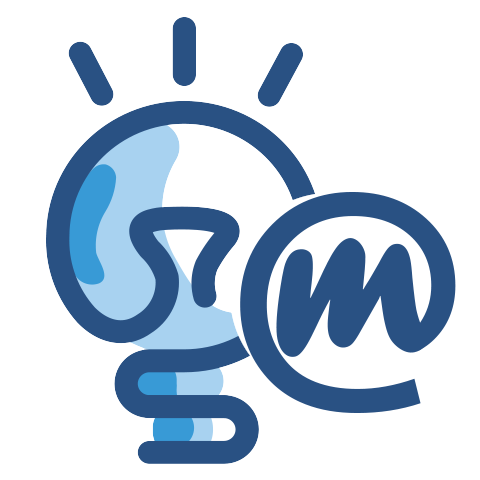
<style>
.page{position:relative;width:480px;height:480px;background:#ffffff}
.page>*{position:absolute;margin:0}
.t1{font:225.1px "ForteMT";color:#295183;scale:0.89 1}
</style>
<div class="page">
<p class="t1" style="left:276px;top:238px;width:151px;height:119px;rotate:-11deg">m</p>
</div>
